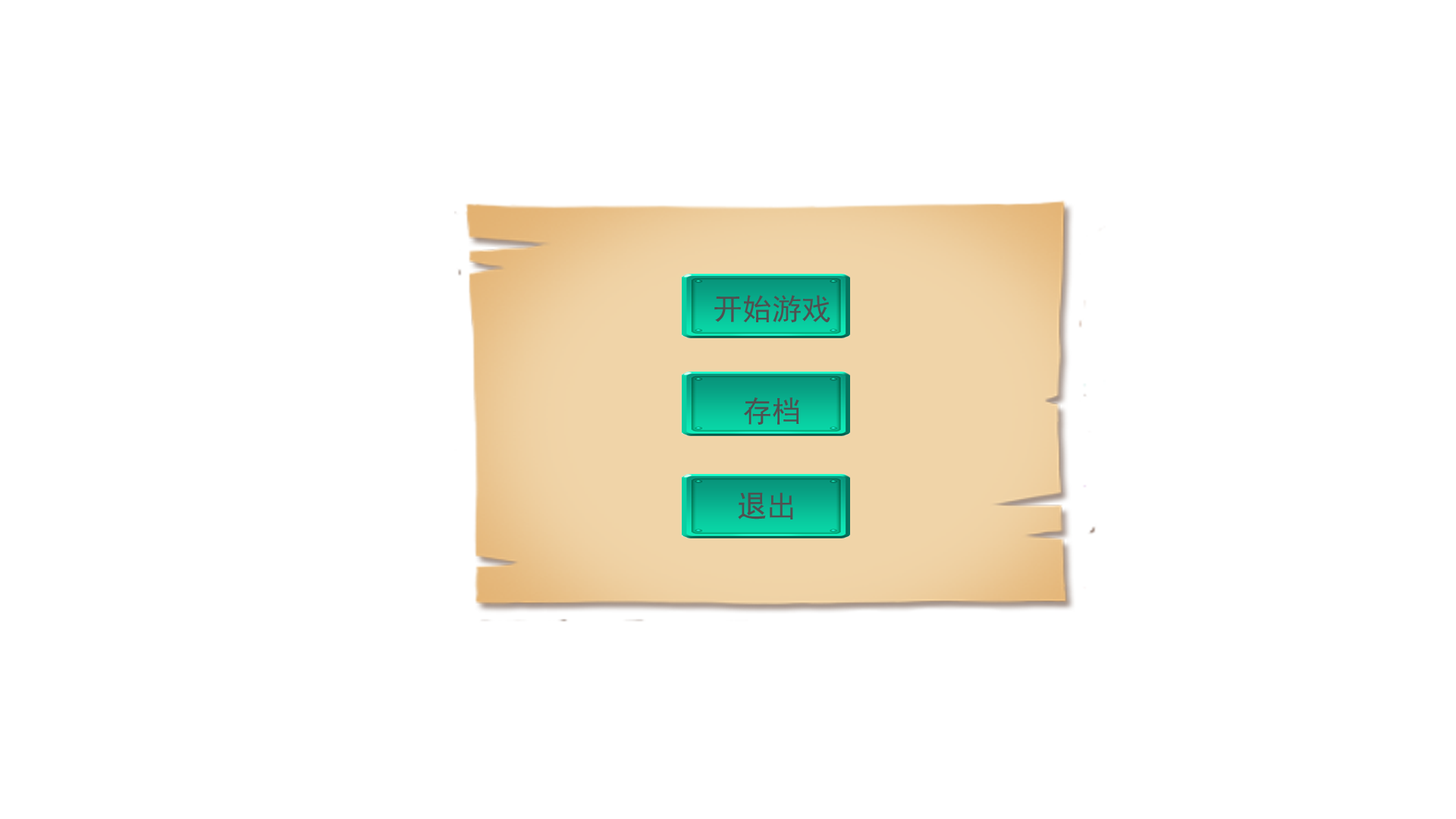
<style>
.page{position:relative;width:1456px;height:819px;background:#ffffff}
.page>*{position:absolute;margin:0}
.t1{font:29.6px "SimHei";color:#505050}
</style>
<div class="page">
<p class="t1" style="left:714px;top:295px;width:116px;height:27px">开始游戏</p>
<p class="t1" style="left:744px;top:397px;width:55px;height:28px">存档</p>
<p class="t1" style="left:738px;top:492px;width:55px;height:27px">退出</p>
</div>
